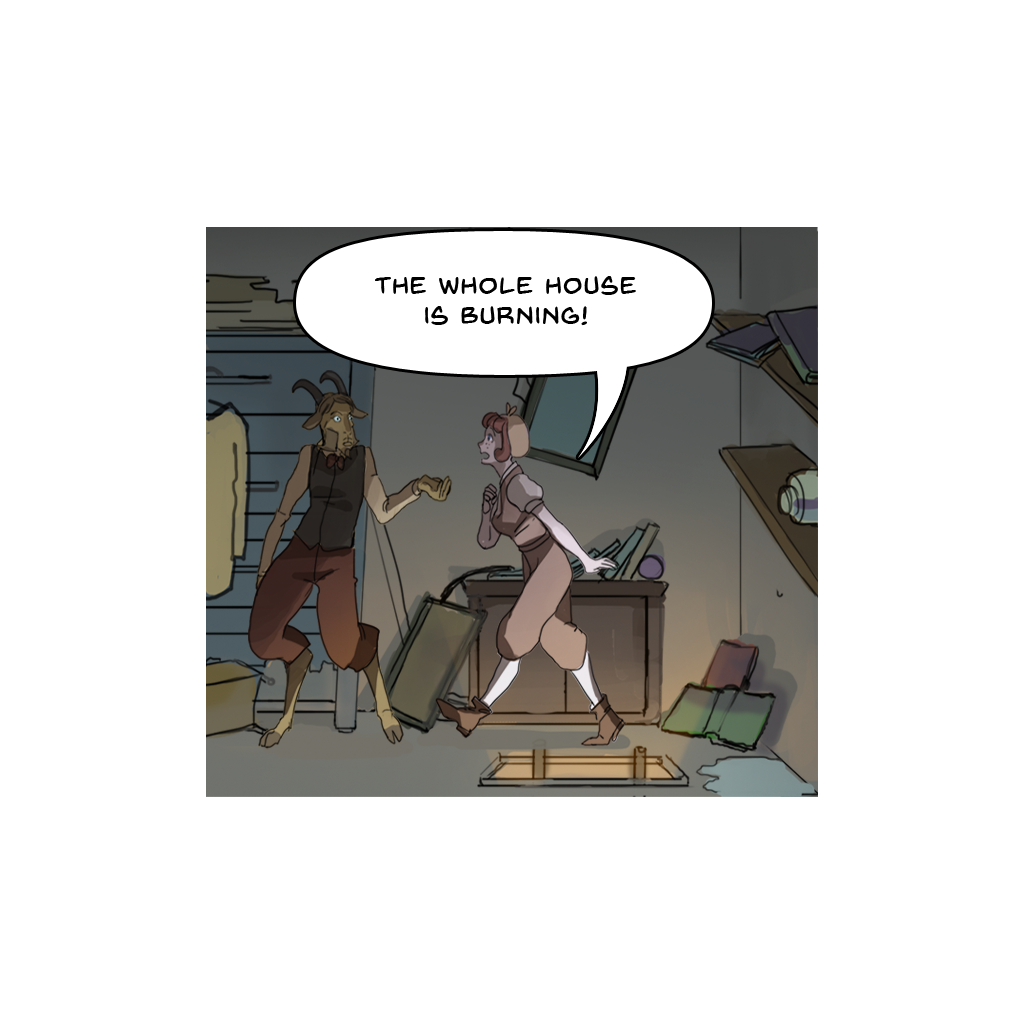
<style>
.page{position:relative;width:1024px;height:1024px;background:#ffffff}
.page>*{position:absolute;margin:0}
.t1{font:25px "BackIssuesBB";letter-spacing:0.05em;color:#000000}
</style>
<div class="page">
<p class="t1" style="left:375px;top:276px;width:261px;height:50px;text-align:center">The whole house is burning!</p>
</div>
